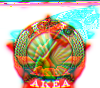
<style>
.page{position:relative;width:100px;height:88px;background:#ffffff}
.page>*{position:absolute;margin:0}
.t1{font:9.7px "EngraversMT";letter-spacing:0.075em}
</style>
<div class="page">
<p class="t1" style="left:30px;top:67px;width:41px;height:9px">AKEA</p>
</div>
